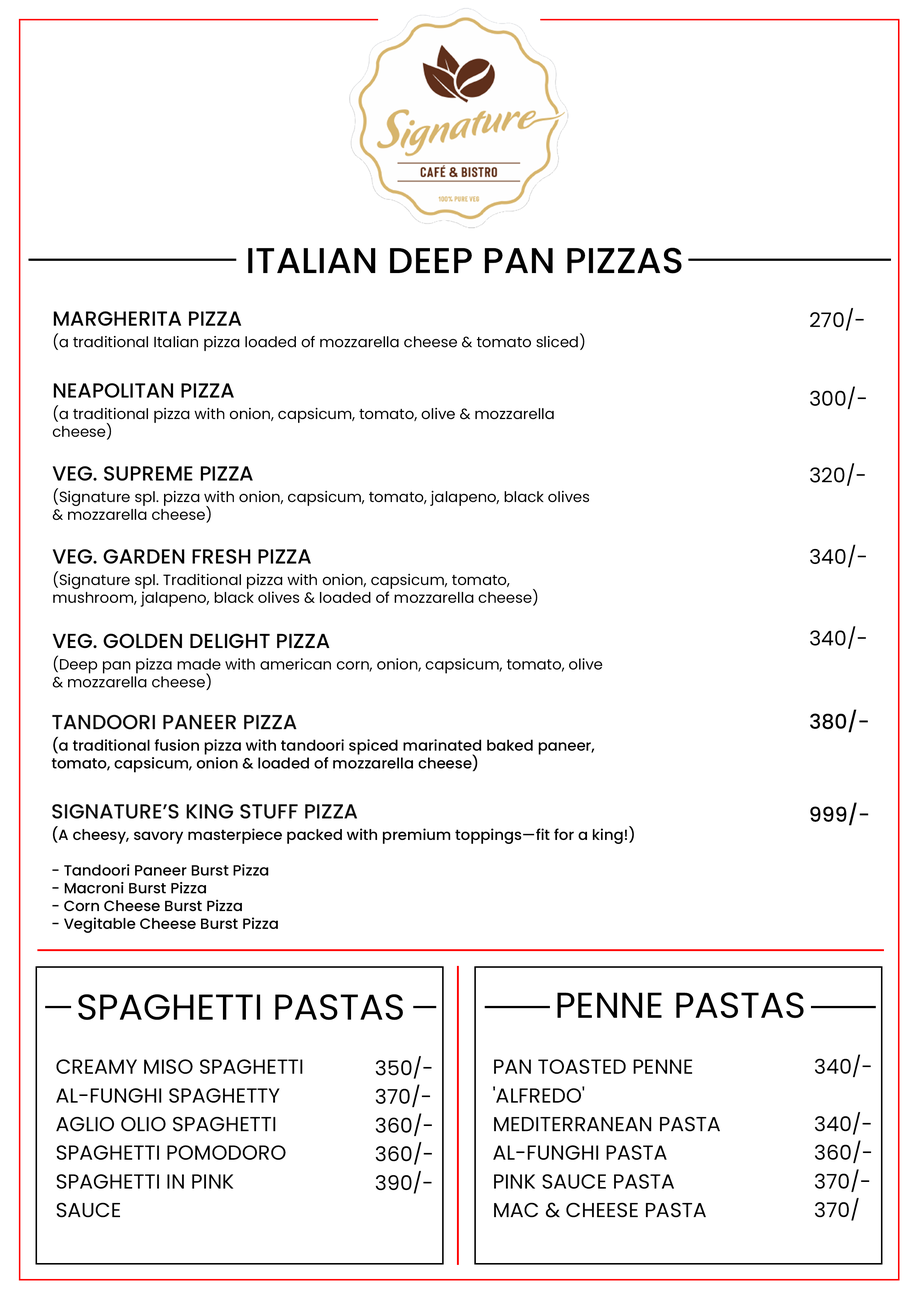
<style>
.page{position:relative;width:918px;height:1299px;background:#ffffff}
.page>*{position:absolute;margin:0}
.t1{font:35.9px "Poppins-Medium";color:#000000;text-transform:uppercase}
.t2{font:14.8px/17.8px "Poppins-Regular";color:#000000}
.t3{font:20.4px/28.7px "Poppins-Medium";color:#000000}
.t4{font:20.4px "Poppins-Regular";color:#000000}
.t5{font:20.4px "Poppins-Medium";color:#000000}
.t6{font:14.8px/17.8px "Poppins-Medium";color:#000000}
.t7{font:20.4px/28.7px "Poppins-Medium";color:#111111}
.t8{font:35.9px "Poppins-Regular";color:#000000;text-transform:uppercase}
.t9{font:20.4px/28.7px "Poppins-Regular";color:#000000}
</style>
<div class="page">
<p class="t1" style="left:248px;top:247px;width:434px;height:26px">ITALIAN DEEP PAN PIZZAS</p>
<p class="t2" style="left:54px;top:311px;width:530px;height:40px"><span class="t3">MARGHERITA PIZZA<br></span>(a traditional Italian pizza loaded of mozzarella cheese &amp; tomato sliced)</p>
<p class="t4" style="left:810px;top:308px;width:54px;height:23px">270/-</p>
<p class="t2" style="left:53px;top:383px;width:501px;height:57px"><span class="t3">NEAPOLITAN PIZZA<br></span>(a traditional pizza with onion, capsicum, tomato, olive &amp; mozzarella<br>cheese)</p>
<p class="t4" style="left:810px;top:386px;width:56px;height:23px">300/-</p>
<p class="t2" style="left:53px;top:466px;width:536px;height:57px"><span class="t3">VEG. SUPREME PIZZA<br></span>(Signature spl. pizza with onion, capsicum, tomato, jalapeno, black olives<br>&amp; mozzarella cheese)</p>
<p class="t4" style="left:810px;top:463px;width:55px;height:23px">320/-</p>
<p class="t4" style="left:810px;top:544px;width:56px;height:23px">340/-</p>
<p class="t2" style="left:53px;top:549px;width:484px;height:58px"><span class="t3">VEG. GARDEN FRESH PIZZA<br></span>(Signature spl. Traditional pizza with onion, capsicum, tomato,<br>mushroom, jalapeno, black olives &amp; loaded of mozzarella cheese)</p>
<p class="t4" style="left:810px;top:626px;width:56px;height:23px">340/-</p>
<p class="t2" style="left:53px;top:633px;width:550px;height:57px"><span class="t3">VEG. GOLDEN DELIGHT PIZZA<br></span>(Deep pan pizza made with american corn, onion, capsicum, tomato, olive<br>&amp; mozzarella cheese)</p>
<p class="t5" style="left:810px;top:709px;width:58px;height:23px">380/-</p>
<p class="t6" style="left:52px;top:715px;width:542px;height:57px"><span class="t7">TANDOORI PANEER PIZZA<br></span>(a traditional fusion pizza with tandoori spiced marinated baked paneer,<br>tomato, capsicum, onion &amp; loaded of mozzarella cheese)</p>
<p class="t6" style="left:52px;top:804px;width:582px;height:129px"><span class="t7">SIGNATURE’S KING STUFF PIZZA<br></span>(A cheesy, savory masterpiece packed with premium toppings—fit for a king!)<br><br>- Tandoori Paneer Burst Pizza<br>- Macroni Burst Pizza<br>- Corn Cheese Burst Pizza<br>- Vegitable Cheese Burst Pizza</p>
<p class="t5" style="left:810px;top:802px;width:59px;height:23px">999/-</p>
<p class="t8" style="left:78px;top:994px;width:325px;height:26px">SPAGHETTI PASTAS</p>
<p class="t8" style="left:557px;top:992px;width:247px;height:26px">PENNE PASTAS</p>
<p class="t9" style="left:56px;top:1059px;width:247px;height:158px">CREAMY MISO SPAGHETTI<br>AL-FUNGHI SPAGHETTY<br>AGLIO OLIO SPAGHETTI<br>SPAGHETTI POMODORO<br>SPAGHETTI IN PINK<br>SAUCE</p>
<p class="t9" style="left:376px;top:1056px;width:56px;height:137px">350/-<br>370/-<br>360/-<br>360/-<br>390/-</p>
<p class="t9" style="left:493px;top:1059px;width:227px;height:158px">PAN TOASTED PENNE<br>'ALFREDO'<br>MEDITERRANEAN PASTA<br>AL-FUNGHI PASTA<br>PINK SAUCE PASTA<br>MAC &amp; CHEESE PASTA</p>
<p class="t9" style="left:815px;top:1054px;width:57px;height:166px">340/-<br><br>340/-<br>360/-<br>370/-<br>370/</p>
</div>
